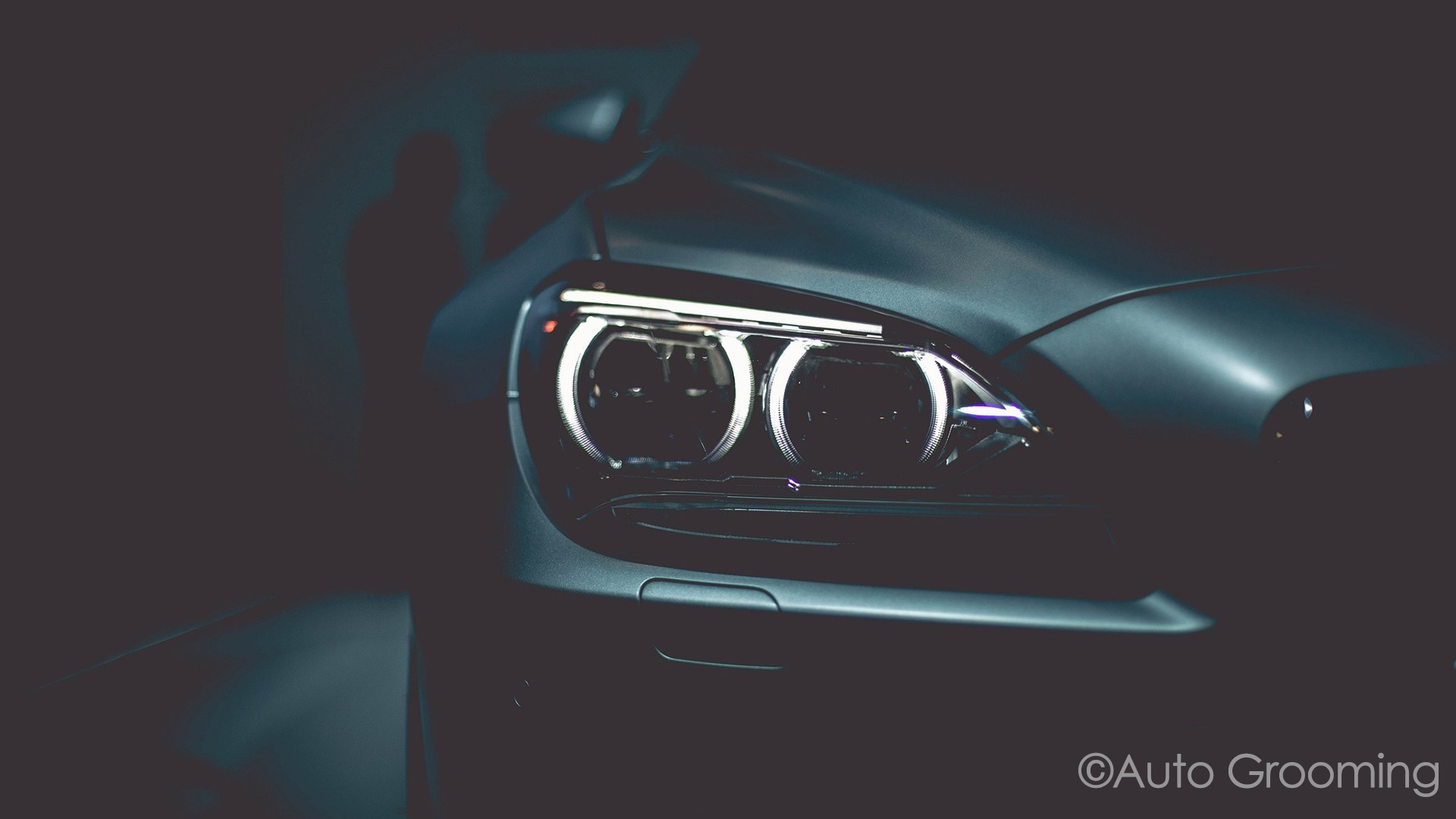
<style>
.page{position:relative;width:1456px;height:819px;background:#373135}
.page>*{position:absolute;margin:0}
.t1{font:45.5px "CenturyGothic";letter-spacing:-0.05em;color:#979596;font-weight:bold}
</style>
<div class="page">
<p class="t1" style="left:1078px;top:752px;width:361px;height:45px">©Auto Grooming</p>
</div>
